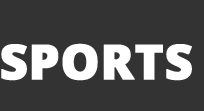
<style>
.page{position:relative;width:204px;height:111px;background:#333333}
.page>*{position:absolute;margin:0}
.t1{font:48.6px "OpenSans-Extrabold";color:#ffffff;font-weight:bold}
</style>
<div class="page">
<p class="t1" style="left:1px;top:43px;width:191px;height:38px">SPORTS</p>
</div>
